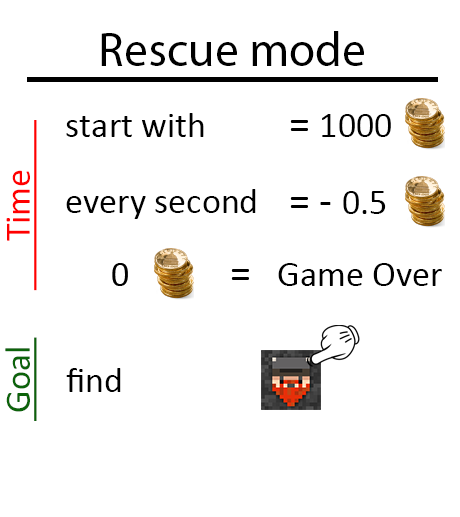
<style>
.page{position:relative;width:460px;height:517px;background:#ffffff}
.page>*{position:absolute;margin:0}
.t1{font:48px "MyriadPro-Regular";color:#000000}
.t2{font:36px "Calibri";color:#000000}
.t3{font:36px "Calibri";color:#ff0000;text-decoration:underline}
.t4{font:42.1px "Calibri";color:#000000}
.t5{font:36px "Calibri";color:#0c630a;text-decoration:underline}
</style>
<div class="page">
<p class="t1" style="left:101px;top:31px;width:263px;height:35px">Rescue mode</p>
<p class="t2" style="left:66px;top:113px;width:138px;height:24px">start with</p>
<p class="t3" style="left:6px;top:120px;width:31px;height:171px;rotate:-90deg">Time</p>
<p class="t2" style="left:290px;top:114px;width:101px;height:23px"><span class="t4">= </span>1000</p>
<p class="t2" style="left:66px;top:189px;width:190px;height:30px">every second</p>
<p class="t4" style="left:290px;top:191px;width:96px;height:23px">= - <span class="t2">0.5</span></p>
<p class="t2" style="left:112px;top:263px;width:16px;height:23px">0</p>
<p class="t4" style="left:231px;top:269px;width:18px;height:11px">=</p>
<p class="t2" style="left:278px;top:263px;width:164px;height:23px">Game Over</p>
<p class="t5" style="left:5px;top:337px;width:32px;height:84px;rotate:-90deg">Goal</p>
<p class="t2" style="left:66px;top:368px;width:55px;height:24px">find</p>
</div>
